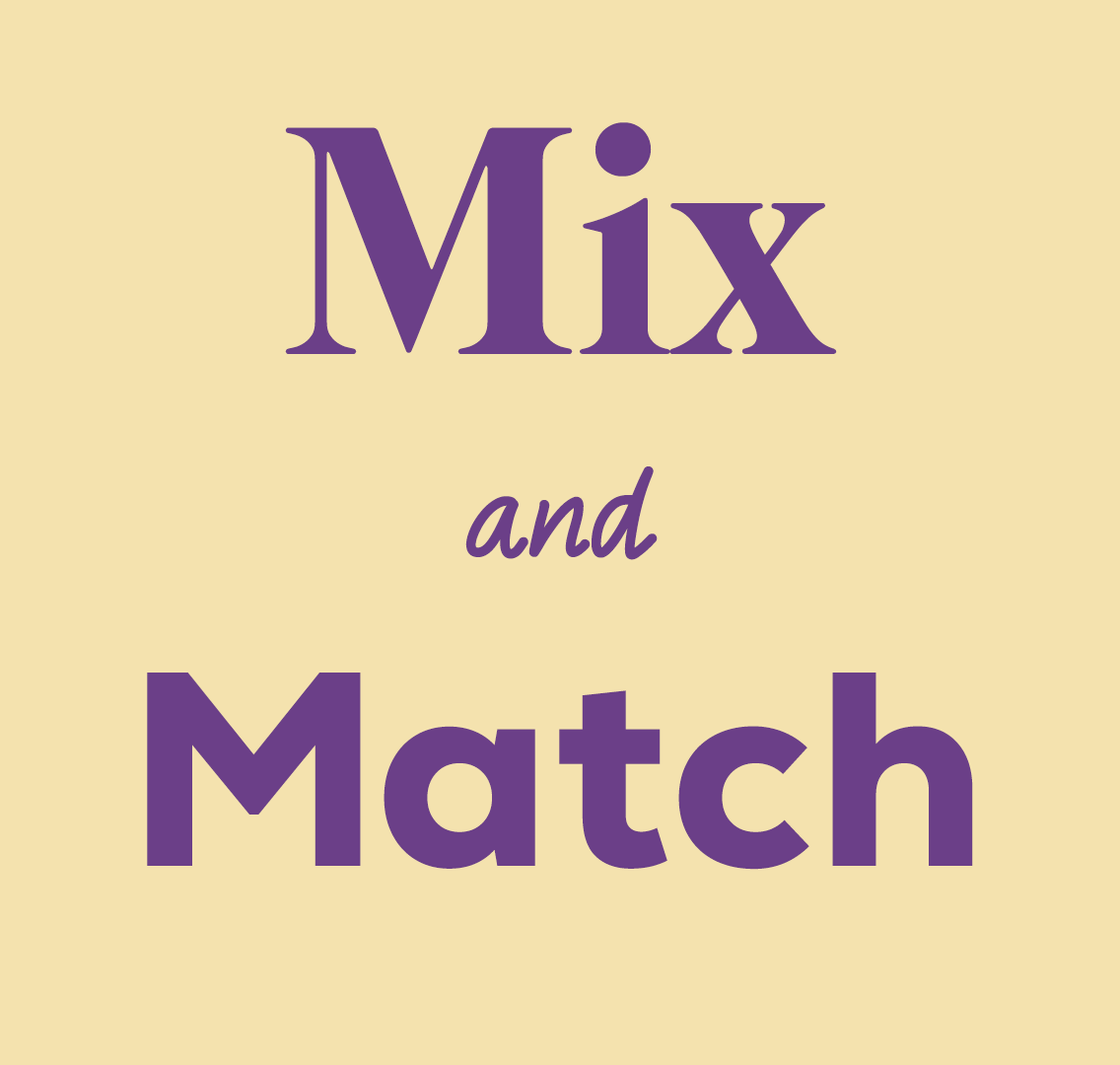
<style>
.page{position:relative;width:1120px;height:1065px;background:#f4e2ae}
.page>*{position:absolute;margin:0}
.t1{font:335.2px "Mermaid-Bold";color:#6b3f88}
.t2{font:118.3px "CurlyWriting";color:#6b3f88}
.t3{font:276px "Nexa-Heavy";color:#6b3f88}
</style>
<div class="page">
<p class="t1" style="left:285px;top:122px;width:552px;height:232px">Mix</p>
<p class="t2" style="left:465px;top:466px;width:193px;height:94px">and</p>
<p class="t3" style="left:147px;top:672px;width:826px;height:198px">Match</p>
</div>
